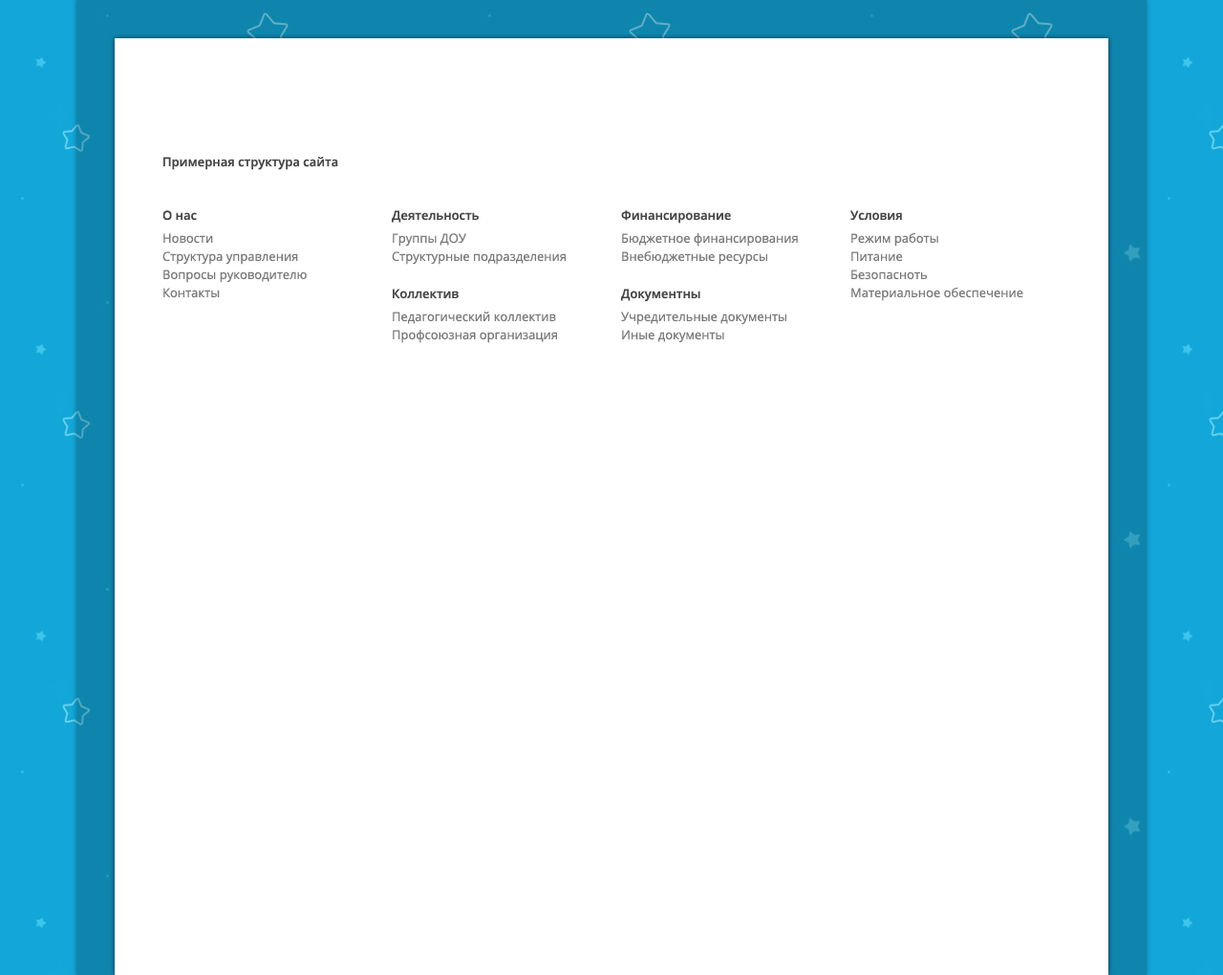
<style>
.page{position:relative;width:1223px;height:975px;background:#ffffff}
.page>*{position:absolute;margin:0}
.t1{font:12.4px "OpenSans-Semibold";color:#464646}
.t2{font:12.4px/18.2px "OpenSans";color:#797979}
.t3{font:12.4px/18.2px "OpenSans-Semibold";color:#464646}
</style>
<div class="page">
<p class="t1" style="left:163px;top:157px;width:175px;height:13px">Примерная структура сайта</p>
<p class="t2" style="left:162px;top:210px;width:145px;height:88px"><span class="t3">О нас<br></span>Новости<br>Структура управления<br>Вопросы руководителю<br>Контакты</p>
<p class="t2" style="left:392px;top:210px;width:174px;height:133px"><span class="t3">Деятельность<br></span>Группы ДОУ<br>Структурные подразделения<br><span class="t3">Коллектив<br></span>Педагогический коллектив<br>Профсоюзная организация</p>
<p class="t2" style="left:621px;top:210px;width:177px;height:133px"><span class="t3">Финансирование<br></span>Бюджетное финансирования<br>Внебюджетные ресурсы<br><span class="t3">Документны<br></span>Учредительные документы<br>Иные документы</p>
<p class="t2" style="left:851px;top:210px;width:173px;height:91px"><span class="t3">Условия<br></span>Режим работы<br>Питание<br>Безопасноть<br>Материальное обеспечение</p>
</div>
